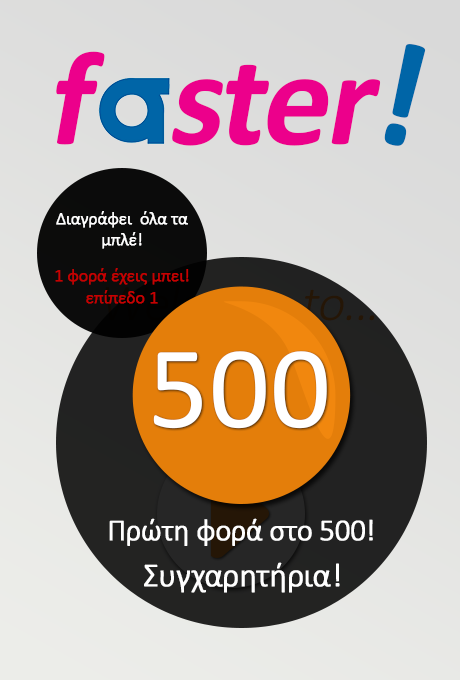
<style>
.page{position:relative;width:460px;height:680px}
.page>*{position:absolute;margin:0}
.t1{font:134.9px "Calibri-Bold";letter-spacing:-0.025em;color:#ec008b;font-style:italic}
.t2{font:150.4px "Calibri-Bold";letter-spacing:-0.025em;color:#0065a7}
.t3{font:18px "Calibri-Light";letter-spacing:-0.025em;color:#ffffff;font-weight:bold}
.t4{font:18px/18px "Calibri-Light";letter-spacing:-0.025em;color:#c60101;font-weight:bold}
.t5{font:18px "Calibri-Light";letter-spacing:-0.025em;color:#c60101;font-weight:bold}
.t6{font:118.2px "Calibri";letter-spacing:-0.025em;color:#ffffff;font-weight:bold}
.t7{font:30.4px "Calibri-Light";letter-spacing:-0.025em;color:#ffffff;font-weight:bold}
.t8{font:33.5px "Calibri-Light";letter-spacing:-0.025em;color:#ffffff;font-weight:bold}
</style>
<div class="page">
<p class="t1" style="left:56px;top:51px;width:325px;height:95px">f   ster</p>
<p class="t2" style="left:384px;top:44px;width:42px;height:102px;rotate:13deg">!</p>
<p class="t3" style="left:55px;top:211px;width:134px;height:93px;text-align:center">Διαγράφει  όλα τα μπλέ!<br><br><span class="t4">1 φορά έχεις μπει!<br></span><span class="t5">επίπεδο 1</span></p>
<p class="t6" style="left:153px;top:351px;width:174px;height:78px">500</p>
<p class="t7" style="left:109px;top:518px;width:264px;height:28px">Πρώτη φορά στο 500!</p>
<p class="t8" style="left:144px;top:562px;width:196px;height:31px">Συγχαρητήρια!</p>
</div>
